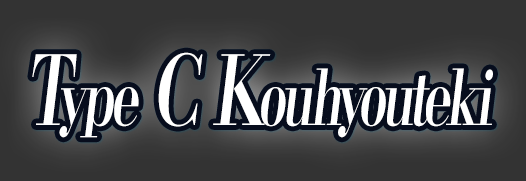
<style>
.page{position:relative;width:526px;height:181px;background:#333333}
.page>*{position:absolute;margin:0}
.t1{font:76.8px "KochoStd-Heavy";letter-spacing:-0.08em;color:#ffffff;font-style:italic;scale:0.68 1}
.t2{font:96px "KochoStd-Heavy";letter-spacing:-0.08em;color:#ffffff;font-style:italic;scale:0.68 1}
</style>
<div class="page">
<p class="t1" style="left:32px;top:52px;width:461px;height:86px"><span class="t2">T</span>ype<span class="t2"> C K</span>ouhyouteki</p>
</div>
